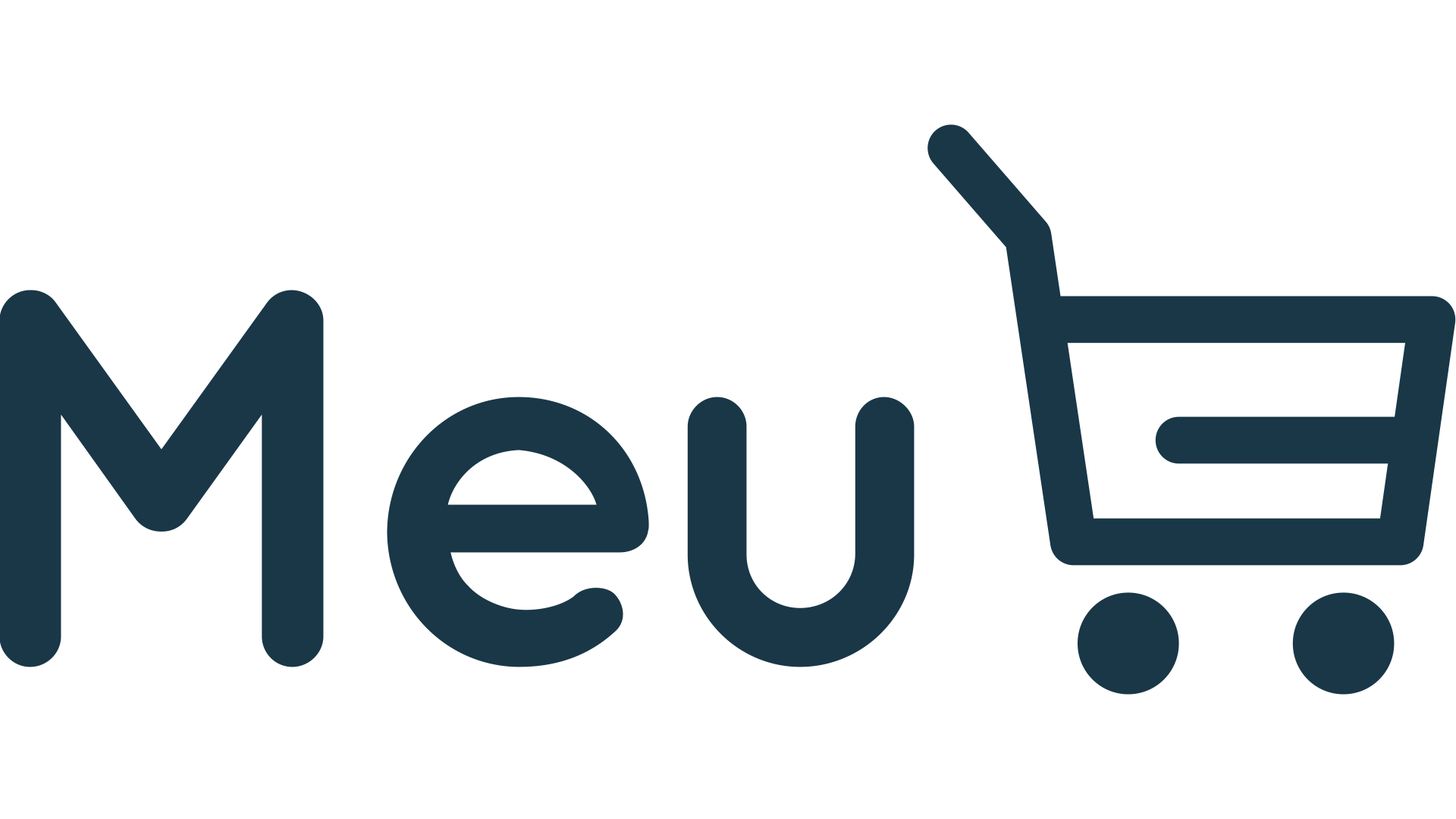
<style>
.page{position:relative;width:1456px;height:819px;background:#ffffff}
.page>*{position:absolute;margin:0}
.t1{font:535px "QuicksandBold-Regular";letter-spacing:-0.1em;color:#193747;font-weight:bold}
</style>
<div class="page">
<p class="t1" style="left:0px;top:290px;width:915px;height:377px">Meu</p>
</div>
